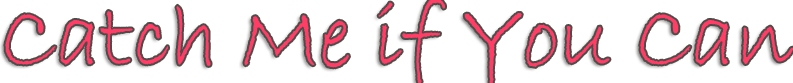
<style>
.page{position:relative;width:793px;height:83px;background:#ffffff}
.page>*{position:absolute;margin:0}
.t1{font:91.4px "BradleyHandITC";color:#ff3d65}
</style>
<div class="page">
<p class="t1" style="left:5px;top:0px;width:788px;height:83px">Catch Me if You Can</p>
</div>
